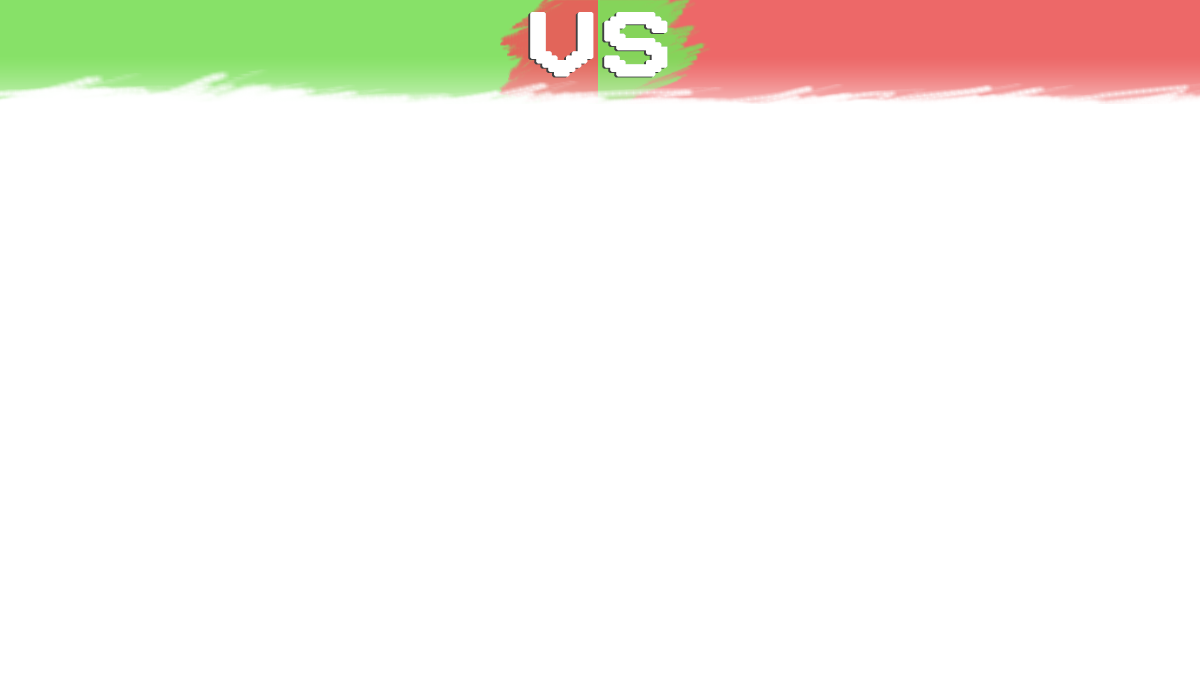
<style>
.page{position:relative;width:1200px;height:675px;background:#ffffff}
.page>*{position:absolute;margin:0}
.t1{font:89.1px "VCROSDMono";color:#ffffff;font-weight:bold;scale:1.37 1}
</style>
<div class="page">
<p class="t1" style="left:528px;top:13px;width:138px;height:65px">VS</p>
<p class="t1" style="left:530px;top:12px;width:138px;height:65px">VS</p>
</div>
